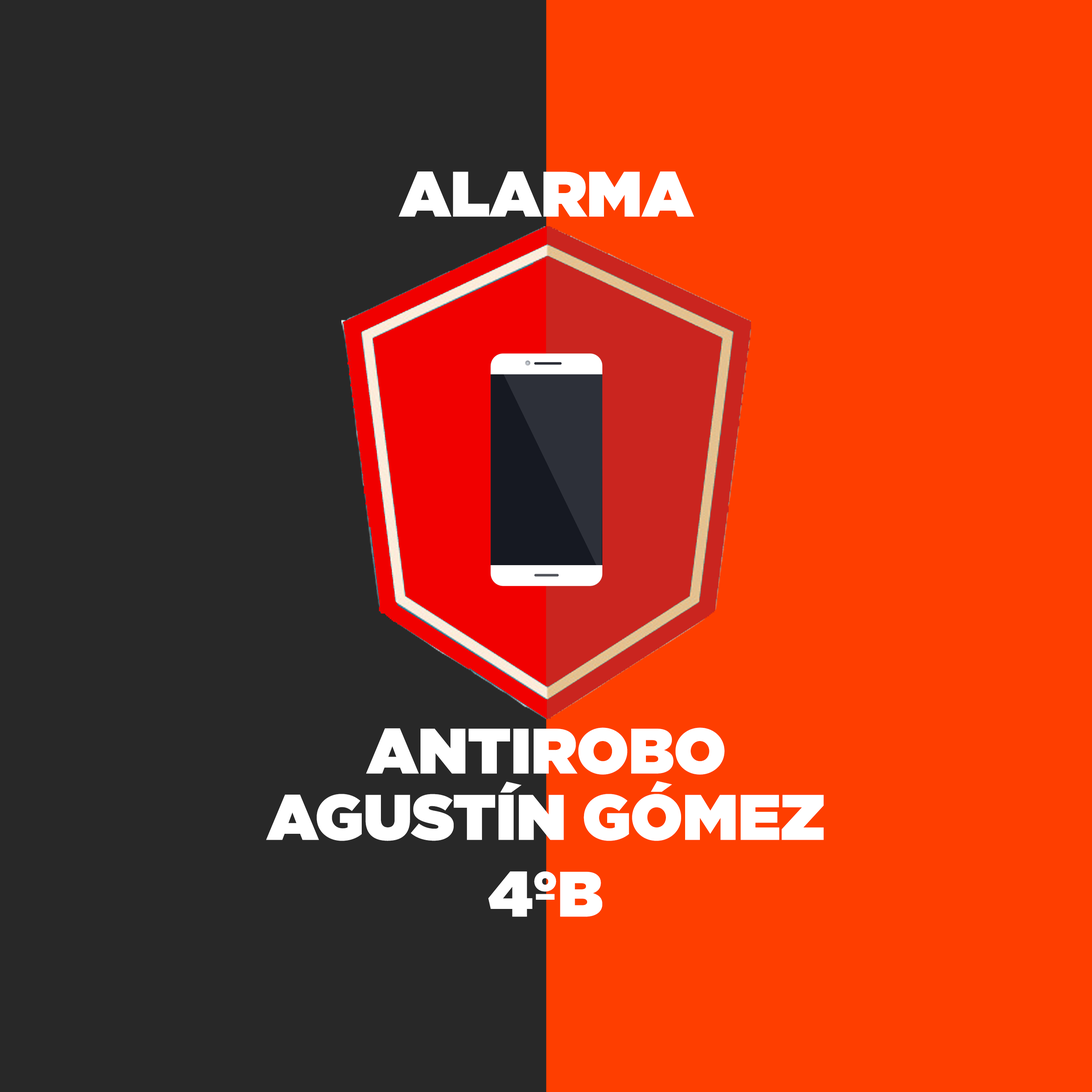
<style>
.page{position:relative;width:1092px;height:1092px;background:#282828}
.page>*{position:absolute;margin:0}
.t1{font:64px "Gotham-Ultra";color:#ffffff}
</style>
<div class="page">
<p class="t1" style="left:399px;top:171px;width:295px;height:46px">ALARMA</p>
<p class="t1" style="left:366px;top:727px;width:359px;height:48px">ANTIROBO</p>
<p class="t1" style="left:266px;top:781px;width:558px;height:136px;text-align:center">AGUSTÍN GÓMEZ<br>4ºB</p>
</div>
